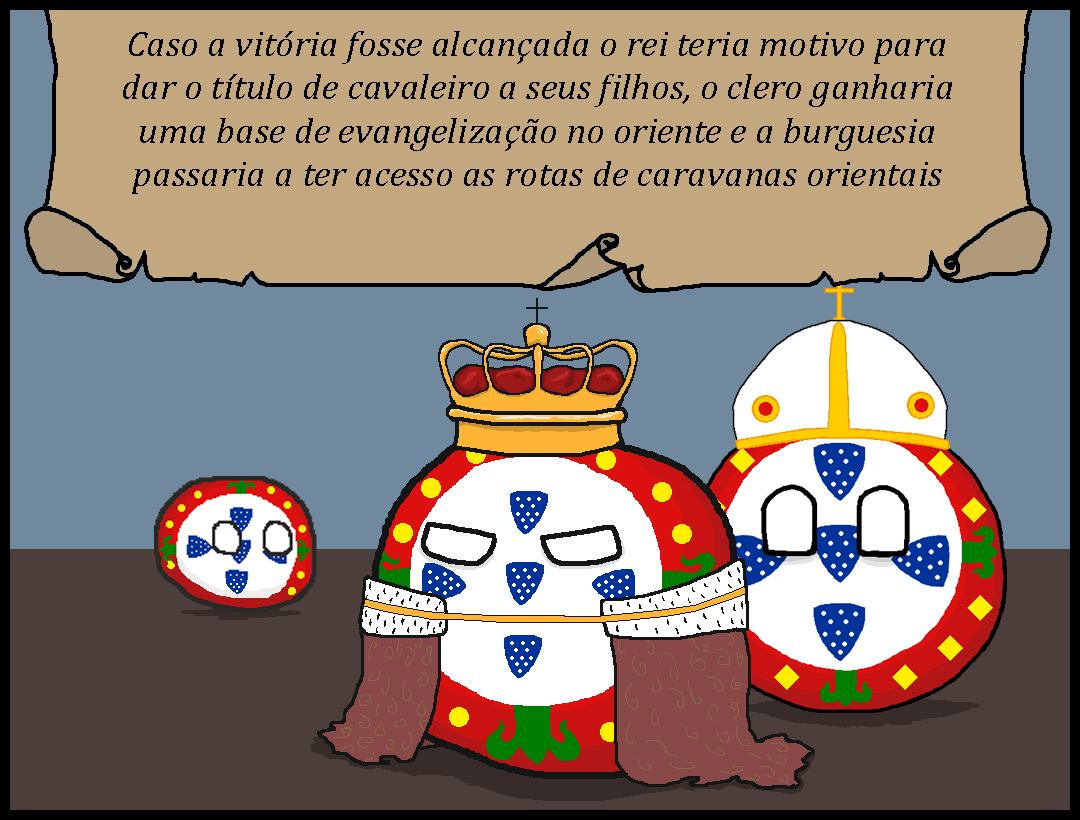
<style>
.page{position:relative;width:1080px;height:820px;background:#c3a77f}
.page>*{position:absolute;margin:0}
.t1{font:36px "Cambria-Italic";color:#000000;scale:1.03 1}
</style>
<div class="page">
<p class="t1" style="left:123px;top:31px;width:829px;height:163px;text-align:center">Caso a vitória fosse alcançada o rei teria motivo para dar o título de cavaleiro a seus filhos, o clero ganharia uma base de evangelização no oriente e a burguesia passaria a ter acesso as rotas de caravanas orientais</p>
</div>
